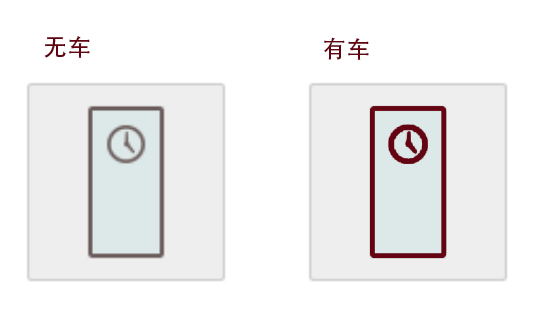
<style>
.page{position:relative;width:534px;height:322px;background:#ffffff}
.page>*{position:absolute;margin:0}
.t1{font:24px "AdobeHeitiStd-Regular";color:#630311}
</style>
<div class="page">
<p class="t1" style="left:44px;top:36px;width:46px;height:22px">无车</p>
<p class="t1" style="left:324px;top:37px;width:45px;height:23px">有车</p>
</div>
